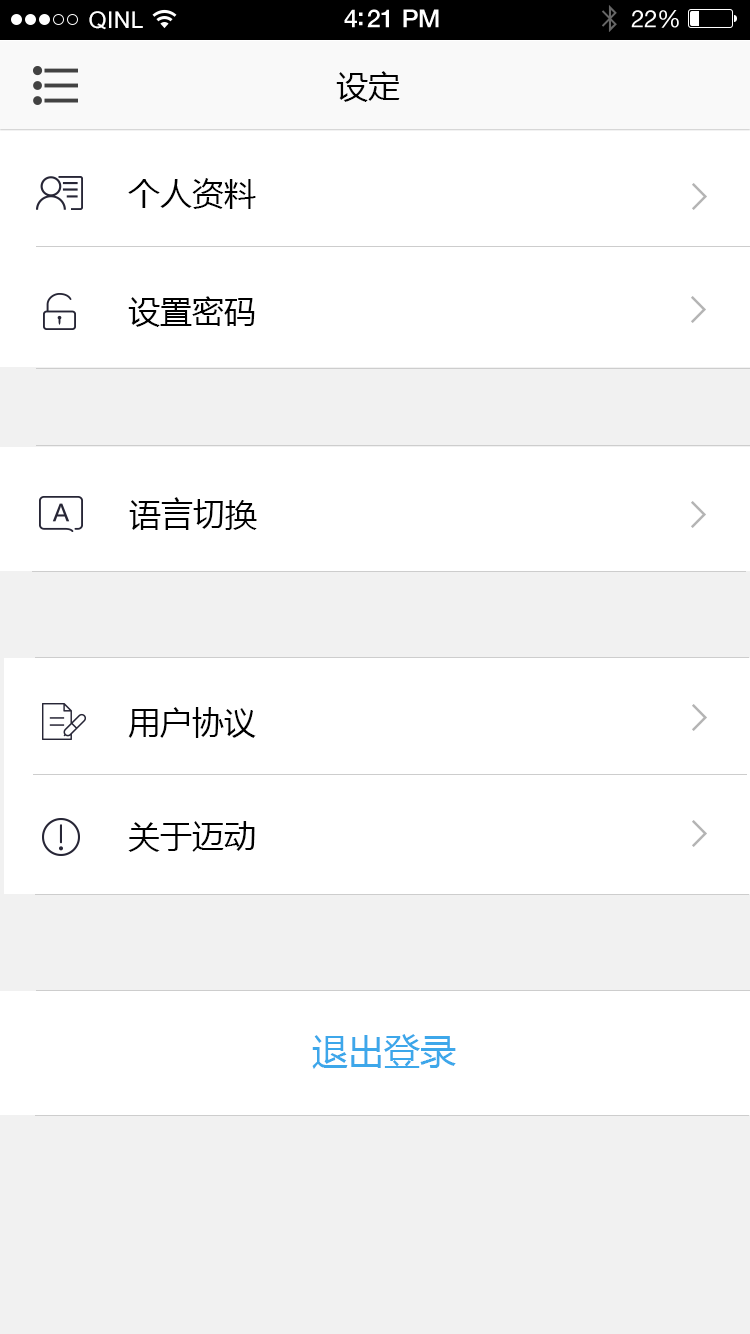
<style>
.page{position:relative;width:750px;height:1334px;background:#ffffff}
.page>*{position:absolute;margin:0}
.t1{font:23px "ArialUnicodeMS";letter-spacing:0.02em;color:#ffffff}
.t2{font:25px "HelveticaNeue-Medium";letter-spacing:-0.02em;color:#ffffff}
.t3{font:24px "HelveticaNeue";letter-spacing:-0.02em;color:#ffffff}
.t4{font:32px "MicrosoftYaHei";color:#000000}
.t5{font:36px "MicrosoftYaHei";color:#3da7ea}
</style>
<div class="page">
<p class="t1" style="left:89px;top:11px;width:54px;height:19px">QINL</p>
<p class="t2" style="left:344px;top:9px;width:95px;height:19px">4:21 PM</p>
<p class="t3" style="left:631px;top:10px;width:48px;height:18px">22%</p>
<p class="t4" style="left:336px;top:71px;width:64px;height:31px">设定</p>
<p class="t4" style="left:128px;top:178px;width:128px;height:31px">个人资料</p>
<p class="t4" style="left:128px;top:296px;width:127px;height:31px">设置密码</p>
<p class="t4" style="left:129px;top:497px;width:128px;height:33px">语言切换</p>
<p class="t4" style="left:128px;top:707px;width:128px;height:31px">用户协议</p>
<p class="t4" style="left:128px;top:821px;width:127px;height:31px">关于迈动</p>
<p class="t5" style="left:312px;top:1034px;width:144px;height:35px">退出登录</p>
</div>
